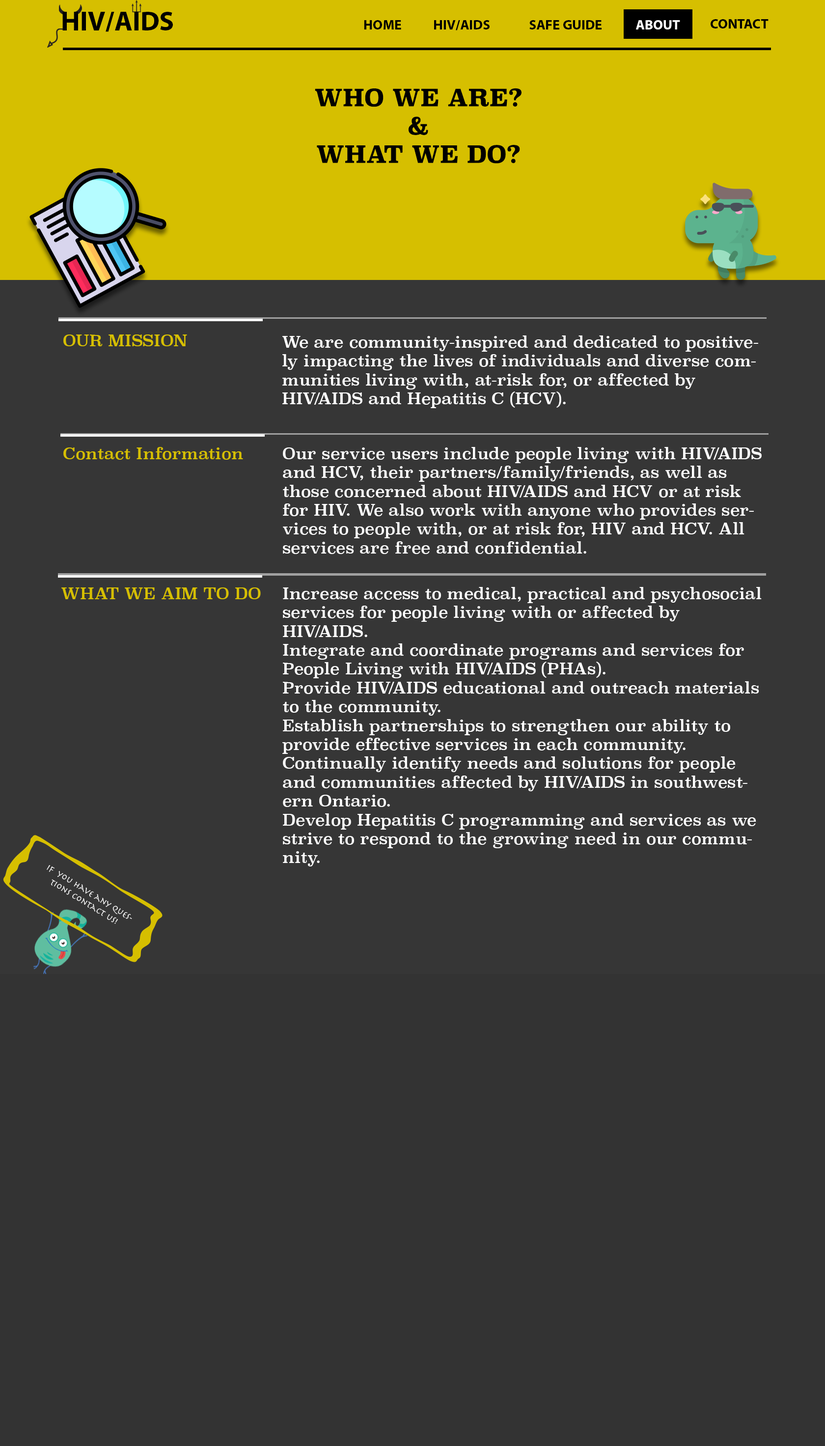
<style>
.page{position:relative;width:825px;height:1446px;background:#363636}
.page>*{position:absolute;margin:0}
.t1{font:27.5px "MyriadPro-Bold";color:#000000}
.t2{font:13.8px "MyriadPro-Bold";color:#000000}
.t3{font:13.8px "MyriadPro-Bold";color:#ffffff}
.t4{font:23.6px "Superclarendon-Bold";color:#000000}
.t5{font:15.7px "Superclarendon-Regular";color:#d6bf00}
.t6{font:15.7px "Superclarendon-Regular";color:#ffffff}
.t7{font:15.8px "Superclarendon-Regular";color:#d6bf00}
.t8{font:8.8px "Herculanum";color:#ffffff}
</style>
<div class="page">
<p class="t1" style="left:62px;top:12px;width:111px;height:20px">HIV/AIDS</p>
<p class="t2" style="left:364px;top:20px;width:37px;height:9px">HOME</p>
<p class="t2" style="left:434px;top:20px;width:56px;height:10px">HIV/AIDS</p>
<p class="t2" style="left:529px;top:20px;width:72px;height:9px">SAFE GUIDE</p>
<p class="t3" style="left:636px;top:20px;width:44px;height:9px">ABOUT</p>
<p class="t2" style="left:710px;top:19px;width:58px;height:9px">CONTACT</p>
<p class="t4" style="left:315px;top:88px;width:206px;height:76px;text-align:center">WHO WE ARE?<br>&amp;<br>WHAT WE DO?</p>
<p class="t5" style="left:63px;top:334px;width:124px;height:12px">OUR MISSION</p>
<p class="t6" style="left:282px;top:335px;width:476px;height:73px;text-align:right">We are community-inspired and dedicated to positively impacting the lives of individuals and diverse communities living with, at-risk for, or affected by HIV/AIDS and Hepatitis C (HCV).</p>
<p class="t5" style="left:63px;top:447px;width:180px;height:13px">Contact Information</p>
<p class="t6" style="left:283px;top:447px;width:479px;height:107px;text-align:right">Our service users include people living with HIV/AIDS and HCV, their partners/family/friends, as well as those concerned about HIV/AIDS and HCV or at risk for HIV. We also work with anyone who provides services to people with, or at risk for, HIV and HCV. All services are free and confidential.</p>
<p class="t7" style="left:61px;top:587px;width:200px;height:12px">WHAT WE AIM TO DO</p>
<p class="t6" style="left:282px;top:587px;width:480px;height:279px;text-align:right">Increase access to medical, practical and psychosocial services for people living with or affected by HIV/AIDS.<br>Integrate and coordinate programs and services for People Living with HIV/AIDS (PHAs).<br>Provide HIV/AIDS educational and outreach materials to the community.<br>Establish partnerships to strengthen our ability to provide effective services in each community.<br>Continually identify needs and solutions for people and communities affected by HIV/AIDS in southwestern Ontario.<br>Develop Hepatitis C programming and services as we strive to respond to the growing need in our community.</p>
<p class="t8" style="left:47px;top:865px;width:85px;height:59px;rotate:32deg">IF  you have any questions contact us!</p>
</div>
